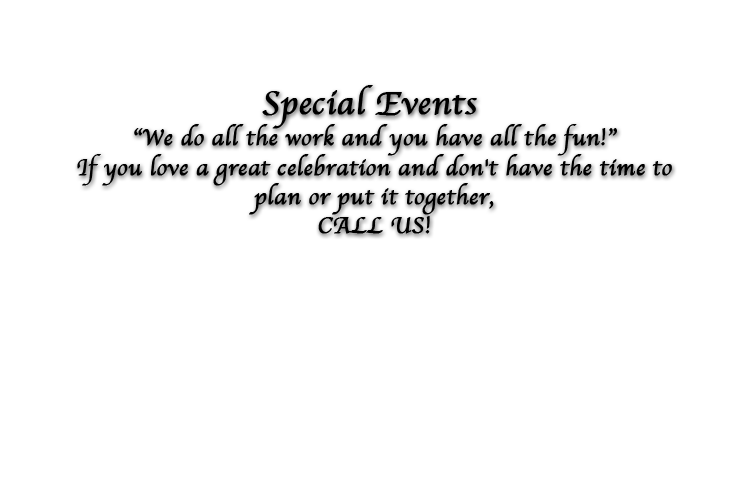
<style>
.page{position:relative;width:747px;height:480px;background:#ffffff}
.page>*{position:absolute;margin:0}
.t1{font:34px "Apple-Chancery";color:#000000;font-weight:bold}
.t2{font:24px "Apple-Chancery";color:#000000;font-weight:bold}
</style>
<div class="page">
<p class="t1" style="left:262px;top:85px;width:215px;height:44px">Special Events</p>
<p class="t2" style="left:134px;top:124px;width:483px;height:32px">“We do all the work and you have all the fun!”</p>
<p class="t2" style="left:77px;top:154px;width:595px;height:80px;text-align:center">If you love a great celebration and don't have the time to<br>plan or put it together,<br>CALL US!</p>
</div>
